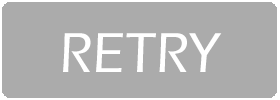
<style>
.page{position:relative;width:280px;height:100px;background:#ababab}
.page>*{position:absolute;margin:0}
.t1{font:58.3px "ErasITC-Medium";color:#ffffff}
</style>
<div class="page">
<p class="t1" style="left:63px;top:33px;width:159px;height:39px">RETRY</p>
</div>
